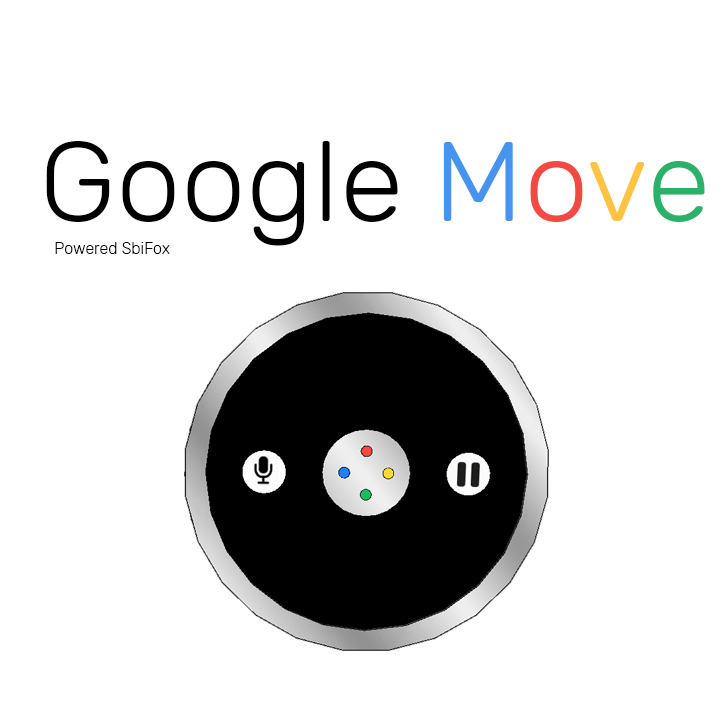
<style>
.page{position:relative;width:726px;height:720px;background:#ffffff}
.page>*{position:absolute;margin:0}
.t1{font:112.4px "Rubik-Light";color:#000000;scale:1.03 1}
.t2{font:112.4px "Rubik-Light";color:#4694ed;scale:1.03 1}
.t3{font:112.4px "Rubik-Light";color:#f24a42;scale:1.03 1}
.t4{font:112.4px "Rubik-Light";color:#fdc343;scale:1.03 1}
.t5{font:112.4px "Rubik-Light";color:#29b267;scale:1.03 1}
.t6{font:16px "Rubik-Light";color:#000000}
</style>
<div class="page">
<p class="t1" style="left:46px;top:141px;width:659px;height:105px">Google <span class="t2">M</span><span class="t3">o</span><span class="t4">v</span><span class="t5">e</span></p>
<p class="t6" style="left:55px;top:242px;width:115px;height:12px">Powered SbiFox</p>
</div>
